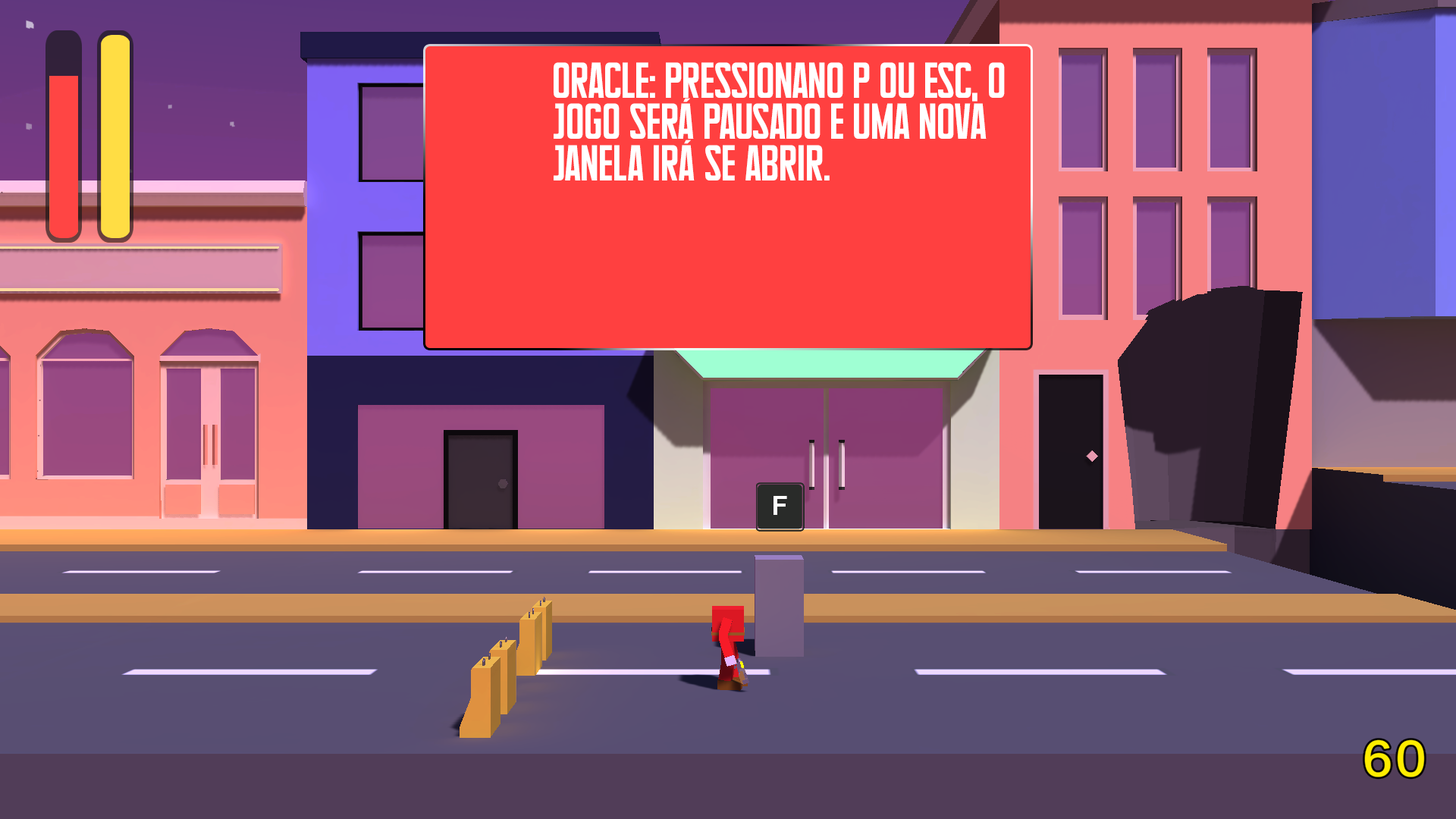
<style>
.page{position:relative;width:1456px;height:819px}
.page>*{position:absolute;margin:0}
.t1{font:34.6px "Supertalls";color:#ffffff}
</style>
<div class="page">
<p class="t1" style="left:554px;top:62px;width:451px;height:118px">Oracle: pressionano p ou esc, o<br>jogo será pausado e uma nova<br>janela irá se abrir.</p>
</div>
